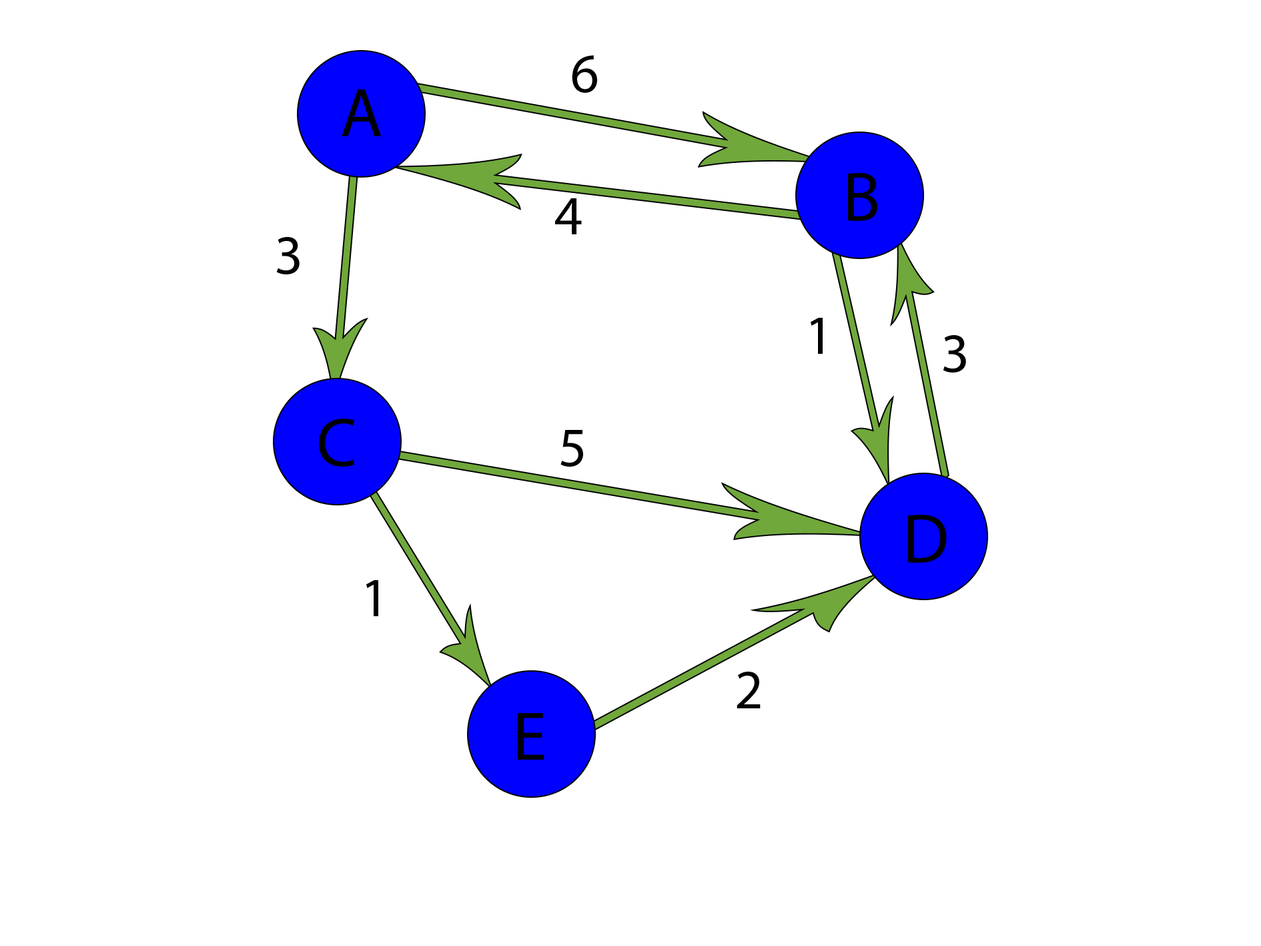
<style>
.page{position:relative;width:1261px;height:946px;background:#ffffff}
.page>*{position:absolute;margin:0}
.t1{font:55.6px "MyriadPro-Regular";color:#000000}
.t2{font:69.5px "MyriadPro-Regular";color:#000000}
</style>
<div class="page">
<p class="t1" style="left:572px;top:55px;width:25px;height:38px">6</p>
<p class="t2" style="left:342px;top:89px;width:39px;height:47px">A</p>
<p class="t2" style="left:848px;top:173px;width:29px;height:48px">B</p>
<p class="t1" style="left:555px;top:198px;width:27px;height:36px">4</p>
<p class="t1" style="left:276px;top:237px;width:24px;height:37px">3</p>
<p class="t1" style="left:811px;top:318px;width:12px;height:36px">1</p>
<p class="t1" style="left:943px;top:335px;width:23px;height:37px">3</p>
<p class="t2" style="left:319px;top:418px;width:36px;height:48px">C</p>
<p class="t1" style="left:561px;top:430px;width:22px;height:36px">5</p>
<p class="t2" style="left:908px;top:514px;width:39px;height:49px">D</p>
<p class="t1" style="left:366px;top:580px;width:12px;height:36px">1</p>
<p class="t1" style="left:737px;top:671px;width:24px;height:37px">2</p>
<p class="t2" style="left:518px;top:713px;width:26px;height:46px">E</p>
</div>
